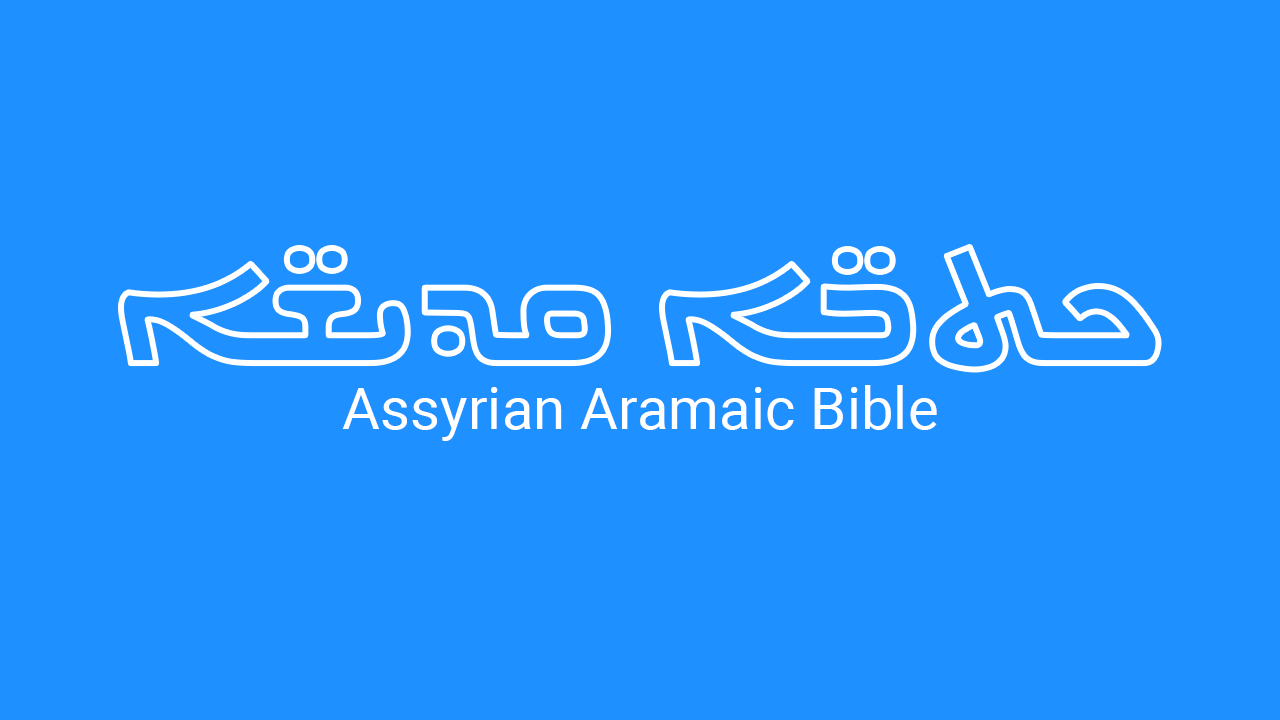
<style>
.page{position:relative;width:1280px;height:720px;background:#1e90ff}
.page>*{position:absolute;margin:0}
.t1{font:58.3px "Roboto-Regular";color:#ffffff}
</style>
<div class="page">
<p class="t1" style="left:342px;top:385px;width:595px;height:56px">Assyrian Aramaic Bible</p>
</div>
